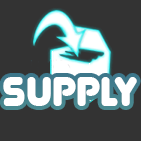
<style>
.page{position:relative;width:141px;height:141px;background:#333333}
.page>*{position:absolute;margin:0}
.t1{font:48px "Junegull";color:#ffffff}
</style>
<div class="page">
<p class="t1" style="left:3px;top:77px;width:134px;height:29px">SUPPLY</p>
</div>
